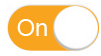
<style>
.page{position:relative;width:101px;height:56px;background:#ffffff}
.page>*{position:absolute;margin:0}
.t1{font:24px "ArialMT";color:#ffffff}
</style>
<div class="page">
<p class="t1" style="left:17px;top:19px;width:30px;height:17px">On</p>
</div>
